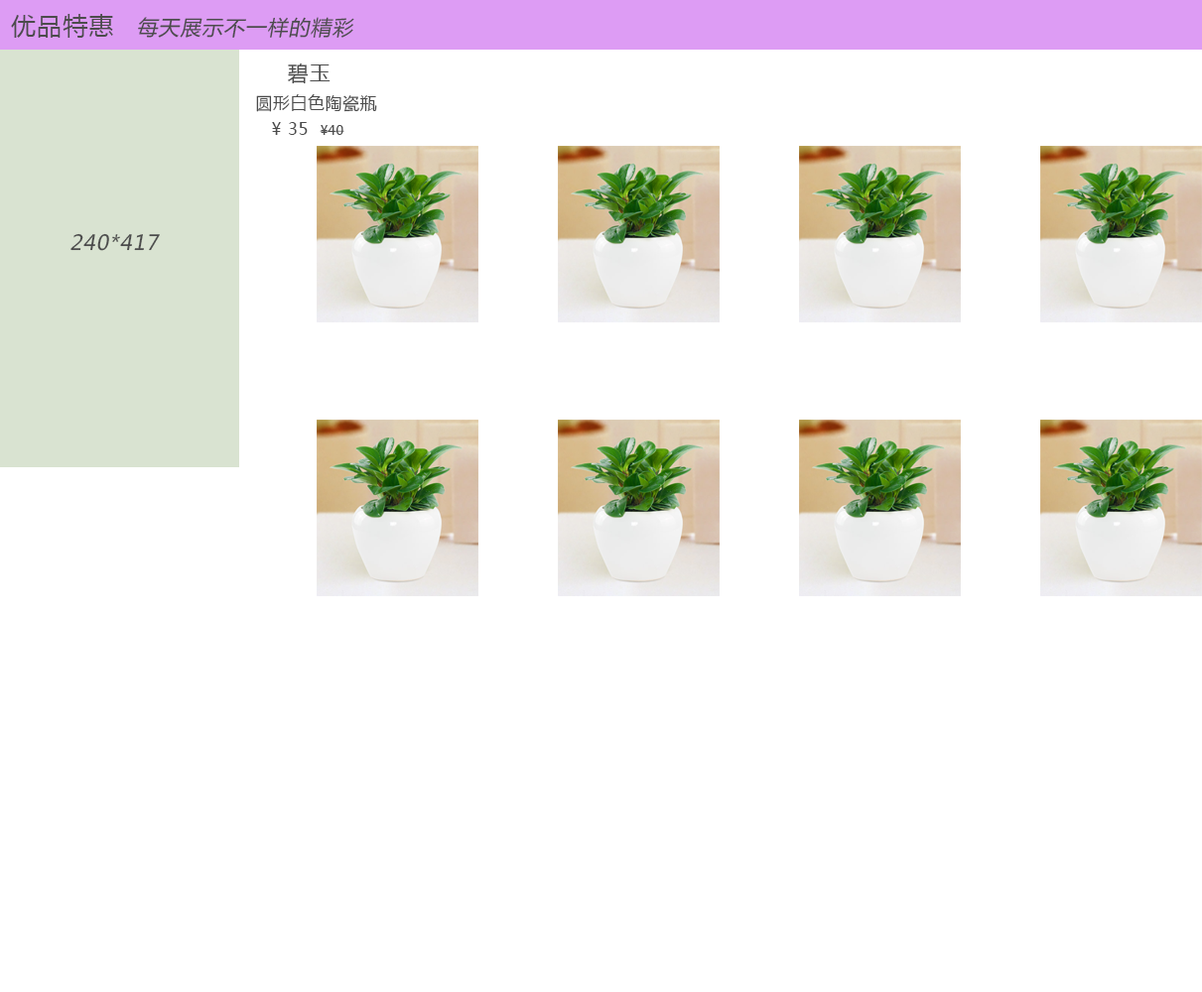
<style>
.page{position:relative;width:1202px;height:992px;background:#ffffff}
.page>*{position:absolute;margin:0}
.t1{font:24.8px "MicrosoftYaHei";letter-spacing:0.05em;color:#4c4c4c}
.t2{font:20.7px "MicrosoftYaHei";letter-spacing:0.05em;color:#4c4c4c;font-style:italic}
.t3{font:20.7px "MicrosoftYaHei";letter-spacing:0.05em;color:#4c4c4c}
.t4{font:16.5px "MicrosoftYaHei";letter-spacing:0.05em;color:#4c4c4c}
.t5{font:12.4px "MicrosoftYaHei";letter-spacing:0.05em;color:#4c4c4c}
</style>
<div class="page">
<p class="t1" style="left:11px;top:14px;width:102px;height:24px">优品特惠</p>
<p class="t2" style="left:138px;top:17px;width:216px;height:21px">每天展示不一样的精彩</p>
<p class="t3" style="left:288px;top:63px;width:42px;height:21px">碧玉</p>
<p class="t4" style="left:256px;top:94px;width:121px;height:18px">圆形白色陶瓷瓶</p>
<p class="t4" style="left:272px;top:122px;width:72px;height:13px">¥ 35  <span class="t5">¥40</span></p>
<p class="t2" style="left:70px;top:233px;width:90px;height:18px">240*417</p>
</div>
